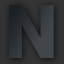
<style>
.page{position:relative;width:64px;height:64px}
.page>*{position:absolute;margin:0}
.t1{font:75px "Roboto-Black";color:#35383c}
</style>
<div class="page">
<p class="t1" style="left:9px;top:5px;width:45px;height:53px">N</p>
</div>
